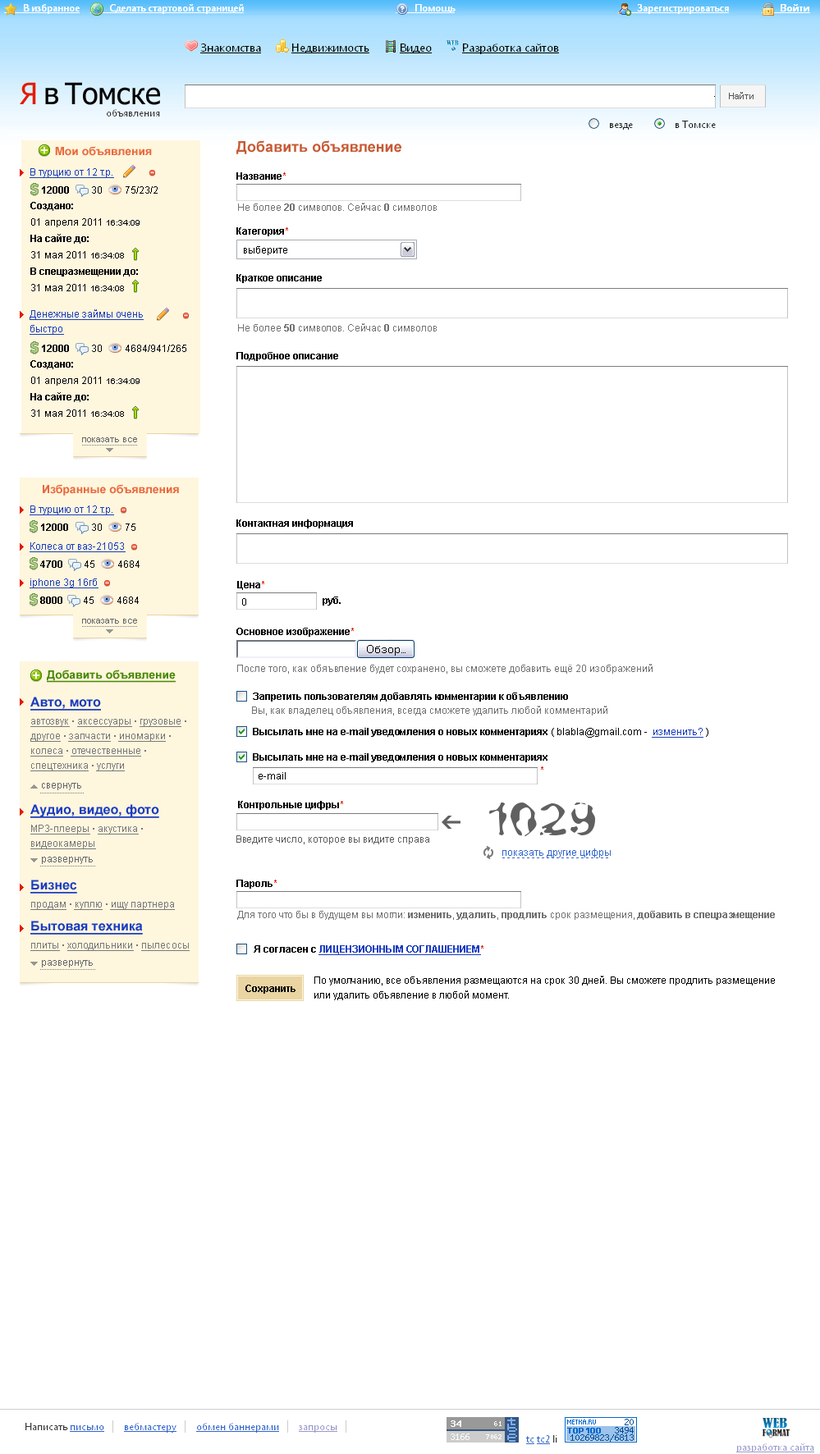
<style>
.page{position:relative;width:820px;height:1454px;background:#ffffff}
.page>*{position:absolute;margin:0}
.t1{font:11.5px "Arial-BoldMT";color:#e96a3d}
.t2{font:14.8px "Arial-BoldMT";color:#c75a34}
.t3{font:9.8px "ArialMT";color:#1a3dc1;text-decoration:underline}
.t4{font:9.8px "Arial-BoldMT";color:#000000}
.t5{font:9.8px "Arial-BoldMT";color:#e31b00}
.t6{font:9.8px "ArialMT";color:#000000}
.t7{font:9.8px "ArialMT";color:#010101}
.t8{font:9.8px/16.4px "Arial-BoldMT";color:#000000}
.t9{font:9.8px/16.4px "ArialMT";color:#000000}
.t10{font:8.2px/16.4px "ArialMT";color:#000000}
.t11{font:9.8px "ArialMT";color:#727272}
.t12{font:9.8px "Arial-BoldMT";color:#727272}
.t13{font:9.8px/14.8px "ArialMT";color:#1a3dc1;text-decoration:underline}
.t14{font:9px "ArialMT";color:#666666}
.t15{font:11.5px "Arial-BoldMT";color:#468800;text-decoration:underline}
.t16{font:13.1px "Arial-BoldMT";color:#1a3dc1;text-decoration:underline}
.t17{font:9.8px/14.8px "ArialMT";color:#797979;text-decoration:underline}
.t18{font:9.8px/14.8px "ArialMT";color:#797979}
.t19{font:9.8px "ArialMT";color:#666666}
.t20{font:9.8px "ArialMT";color:#5d5d5d}
.t21{font:9.8px "ArialMT";color:#3366cc}
.t22{font:9.8px "ArialMT";color:#797979;text-decoration:underline}
.t23{font:9.8px "ArialMT";color:#797979}
.t24{font:9.8px "Arial-BoldMT";color:#1a3dc1;text-decoration:underline}
.t25{font:9.8px/14.8px "ArialMT";color:#000000}
</style>
<div class="page">
<p class="t1" style="left:55px;top:146px;width:97px;height:10px">Мои объявления</p>
<p class="t2" style="left:236px;top:140px;width:165px;height:14px">Добавить объявление</p>
<p class="t3" style="left:30px;top:168px;width:84px;height:10px">В турцию от 12 т.р.</p>
<p class="t4" style="left:236px;top:172px;width:50px;height:8px">Название<span class="t5">*</span></p>
<p class="t4" style="left:42px;top:186px;width:27px;height:8px">12000</p>
<p class="t6" style="left:92px;top:186px;width:10px;height:8px">30</p>
<p class="t7" style="left:126px;top:186px;width:32px;height:8px">75/23/2</p>
<p class="t8" style="left:30px;top:202px;width:110px;height:89px">Создано:<span class="t9"><br>01 апреля 2011 </span><span class="t10">16:34:09<br></span>На сайте до:<br><span class="t9">31 мая 2011 </span><span class="t10">16:34:08<br></span>В спецразмещении до:<br><span class="t9">31 мая 2011 </span><span class="t10">16:34:08</span></p>
<p class="t11" style="left:238px;top:203px;width:199px;height:8px">Не более <span class="t12">20</span> символов. Сейчас <span class="t12">0</span> символов</p>
<p class="t4" style="left:236px;top:227px;width:52px;height:9px">Категория<span class="t5">*</span></p>
<p class="t6" style="left:244px;top:246px;width:43px;height:9px">выберите</p>
<p class="t4" style="left:236px;top:274px;width:86px;height:9px">Краткое описание</p>
<p class="t13" style="left:30px;top:309px;width:114px;height:26px">Денежные займы очень<br>быстро</p>
<p class="t11" style="left:238px;top:323px;width:199px;height:9px">Не более <span class="t12">50</span> символов. Сейчас <span class="t12">0</span> символов</p>
<p class="t4" style="left:42px;top:345px;width:27px;height:7px">12000</p>
<p class="t6" style="left:92px;top:345px;width:10px;height:7px">30</p>
<p class="t7" style="left:126px;top:345px;width:60px;height:7px">4684/941/265</p>
<p class="t4" style="left:236px;top:352px;width:102px;height:9px">Подробное описание</p>
<p class="t9" style="left:30px;top:360px;width:110px;height:57px"><span class="t8">Создано:</span><br>01 апреля 2011 <span class="t10">16:34:09<br></span><span class="t8">На сайте до:<br></span>31 мая 2011 <span class="t10">16:34:08</span></p>
<p class="t14" style="left:82px;top:437px;width:55px;height:5px">показать все</p>
<p class="t1" style="left:43px;top:484px;width:136px;height:12px">Избранные объявления</p>
<p class="t3" style="left:30px;top:506px;width:84px;height:9px">В турцию от 12 т.р.</p>
<p class="t4" style="left:236px;top:520px;width:117px;height:9px">Контактная информация</p>
<p class="t4" style="left:41px;top:524px;width:27px;height:7px">12000</p>
<p class="t6" style="left:92px;top:524px;width:10px;height:7px">30</p>
<p class="t7" style="left:126px;top:524px;width:9px;height:7px">75</p>
<p class="t3" style="left:30px;top:543px;width:96px;height:9px">Колеса от ваз-21053</p>
<p class="t4" style="left:40px;top:561px;width:22px;height:7px">4700</p>
<p class="t6" style="left:85px;top:561px;width:9px;height:7px">45</p>
<p class="t7" style="left:118px;top:561px;width:22px;height:7px">4684</p>
<p class="t3" style="left:30px;top:579px;width:68px;height:9px">iphone 3g 16гб</p>
<p class="t4" style="left:237px;top:581px;width:27px;height:9px">Цена<span class="t5">*</span></p>
<p class="t4" style="left:40px;top:597px;width:22px;height:7px">8000</p>
<p class="t6" style="left:84px;top:597px;width:10px;height:7px">45</p>
<p class="t7" style="left:117px;top:597px;width:22px;height:7px">4684</p>
<p class="t6" style="left:242px;top:598px;width:4px;height:8px">0</p>
<p class="t4" style="left:323px;top:597px;width:18px;height:9px">руб.</p>
<p class="t14" style="left:82px;top:619px;width:55px;height:5px">показать все</p>
<p class="t4" style="left:236px;top:628px;width:118px;height:9px">Основное изображение<span class="t5">*</span></p>
<p class="t11" style="left:237px;top:664px;width:415px;height:10px">После того, как обяъвление будет сохранено, вы сможете добавить ещё 20 изображений</p>
<p class="t15" style="left:47px;top:670px;width:129px;height:13px">Добавить объявление</p>
<p class="t16" style="left:30px;top:697px;width:71px;height:14px">Авто, мото</p>
<p class="t4" style="left:253px;top:693px;width:315px;height:9px">Запретить пользователям добавлять комментарии к объявлению</p>
<p class="t11" style="left:252px;top:706px;width:355px;height:10px">Вы, как владелец объявления, всегда сможете удалить любой комментарий</p>
<p class="t17" style="left:30px;top:719px;width:156px;height:52px">автозвук<span class="t18"> ▪ </span>аксессуары<span class="t18"> ▪ </span>грузовые<span class="t18"> ▪ <br></span>другое<span class="t18"> ▪ </span>запчасти<span class="t18"> ▪ </span>иномарки<span class="t18"> ▪ <br></span>колеса<span class="t18"> ▪ </span>отечественные<span class="t18"> ▪ </span>спецтехника<span class="t18"> ▪ </span>услуги</p>
<p class="t4" style="left:253px;top:728px;width:455px;height:10px">Высылать мне на e-mail уведомления о новых комментариях <span class="t6">( blabla@gmail.com -  </span><span class="t3">изменить?</span><span class="t6"> )</span></p>
<p class="t4" style="left:253px;top:753px;width:294px;height:9px">Высылать мне на e-mail уведомления о новых комментариях</p>
<p class="t6" style="left:259px;top:772px;width:27px;height:8px">e-mail</p>
<p class="t5" style="left:541px;top:767px;width:2px;height:3px">*</p>
<p class="t19" style="left:42px;top:783px;width:39px;height:7px">свернуть</p>
<p class="t16" style="left:30px;top:804px;width:129px;height:14px">Аудио, видео, фото</p>
<p class="t4" style="left:238px;top:801px;width:105px;height:9px">Контрольные цифры<span class="t5">*</span></p>
<p class="t17" style="left:30px;top:825px;width:113px;height:24px">MP3-плееры<span class="t18"> ▪ </span>акустика<span class="t18"> ▪ </span>видеокамеры</p>
<p class="t20" style="left:236px;top:836px;width:193px;height:9px">Введите число, которое вы видите справа</p>
<p class="t19" style="left:42px;top:857px;width:51px;height:7px">развернуть</p>
<p class="t21" style="left:502px;top:849px;width:109px;height:9px">показать другие цифры</p>
<p class="t16" style="left:30px;top:880px;width:47px;height:14px">Бизнес</p>
<p class="t4" style="left:236px;top:880px;width:41px;height:9px">Пароль<span class="t5">*</span></p>
<p class="t22" style="left:30px;top:902px;width:145px;height:8px">продам<span class="t23"> ▪ </span>куплю<span class="t23"> ▪ </span>ищу партнера</p>
<p class="t11" style="left:237px;top:911px;width:538px;height:9px">Для того что бы в будущем вы могли: <span class="t12">изменить</span>, <span class="t12">удалить</span>, <span class="t12">продлить </span>срок размещения, <span class="t12">добавить в спецразмещение</span></p>
<p class="t16" style="left:30px;top:921px;width:113px;height:14px">Бытовая техника</p>
<p class="t22" style="left:30px;top:943px;width:160px;height:8px">плиты<span class="t23"> ▪ </span>холодильники<span class="t23"> ▪ </span>пылесосы</p>
<p class="t24" style="left:254px;top:945px;width:229px;height:10px"><span class="t4">Я согласен с </span>ЛИЦЕНЗИОННЫМ СОГЛАШЕНИЕМ<span class="t5">*</span></p>
<p class="t19" style="left:42px;top:960px;width:51px;height:8px">развернуть</p>
<p class="t25" style="left:314px;top:976px;width:461px;height:24px">По умолчанию, все объявления размещаются на срок 30 дней. Вы сможете продлить размещение<br>или удалить объявление в любой момент.</p>
<p class="t4" style="left:245px;top:985px;width:50px;height:9px">Сохранить</p>
</div>
